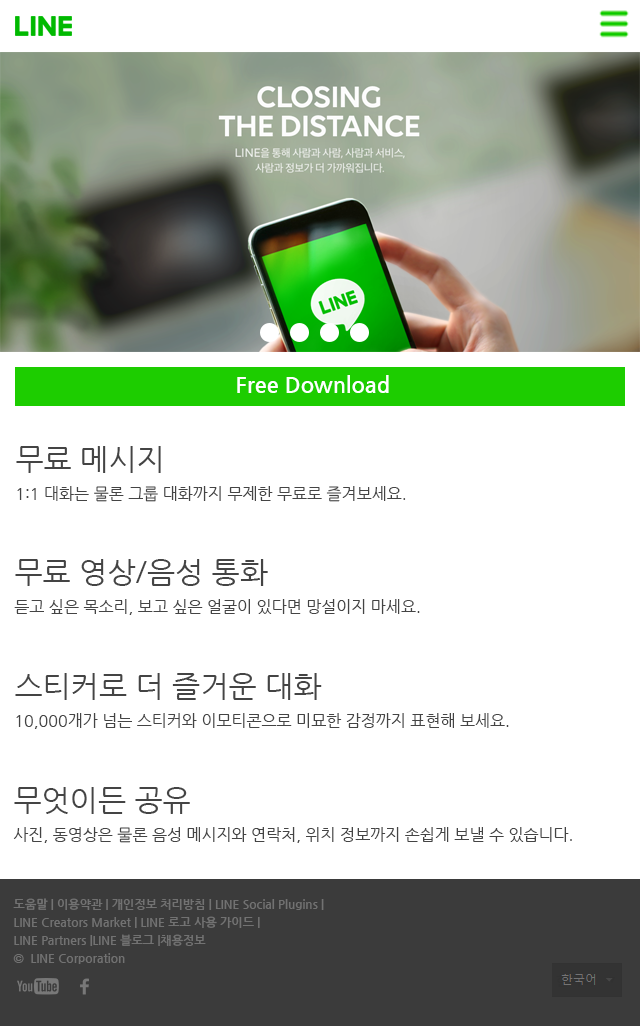
<style>
.page{position:relative;width:640px;height:1026px;background:#ffffff}
.page>*{position:absolute;margin:0}
.t1{font:22px "NanumGothicBold";color:#ffffff}
.t2{font:16px/30px "NanumGothic";color:#444444}
.t3{font:30px/30px "NanumGothic";color:#444444}
.t4{font:12px/18px "NanumGothicBold";color:#727272}
</style>
<div class="page">
<p class="t1" style="left:237px;top:375px;width:152px;height:18px">Free Download</p>
<p class="t2" style="left:16px;top:446px;width:390px;height:56px"><span class="t3">무료 메시지<br></span>1:1 대화는 물론 그룹 대화까지 무제한 무료로 즐겨보세요.</p>
<p class="t2" style="left:14px;top:559px;width:406px;height:56px"><span class="t3">무료 영상/음성 통화<br></span>듣고 싶은 목소리, 보고 싶은 얼굴이 있다면 망설이지 마세요.</p>
<p class="t2" style="left:15px;top:673px;width:494px;height:56px"><span class="t3">스티커로 더 즐거운 대화<br></span>10,000개가 넘는 스티커와 이모티콘으로 미묘한 감정까지 표현해 보세요.</p>
<p class="t2" style="left:13px;top:787px;width:559px;height:56px"><span class="t3">무엇이든 공유 <br></span>사진, 동영상은 물론 음성 메시지와 연락처, 위치 정보까지 손쉽게 보낼 수 있습니다.</p>
<p class="t4" style="left:13px;top:898px;width:311px;height:66px">도움말 | 이용약관 | 개인정보 처리방침 | LINE Social Plugins | <br>LINE Creators Market | LINE 로고 사용 가이드 | <br>LINE Partners |LINE 블로그 |채용정보<br>©  LINE Corporation</p>
</div>
